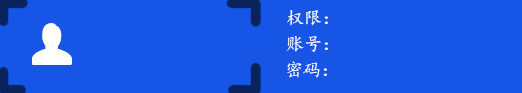
<style>
.page{position:relative;width:522px;height:93px;background:#1655e5}
.page>*{position:absolute;margin:0}
.t1{font:18px "¿¬Ìå";color:#fdfdfe}
</style>
<div class="page">
<p class="t1" style="left:287px;top:10px;width:41px;height:16px">权限：</p>
<p class="t1" style="left:286px;top:36px;width:42px;height:16px">账号：</p>
<p class="t1" style="left:287px;top:61px;width:40px;height:17px">密码：</p>
</div>
